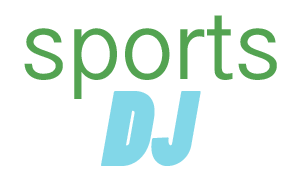
<style>
.page{position:relative;width:301px;height:186px;background:#ffffff}
.page>*{position:absolute;margin:0}
.t1{font:100px "MalayalamSangamMN";color:#53a351}
.t2{font:100px "PoplarStd";color:#82d7e8;font-style:italic}
</style>
<div class="page">
<p class="t1" style="left:24px;top:15px;width:253px;height:84px">sports</p>
<p class="t2" style="left:101px;top:91px;width:100px;height:75px">DJ</p>
</div>
